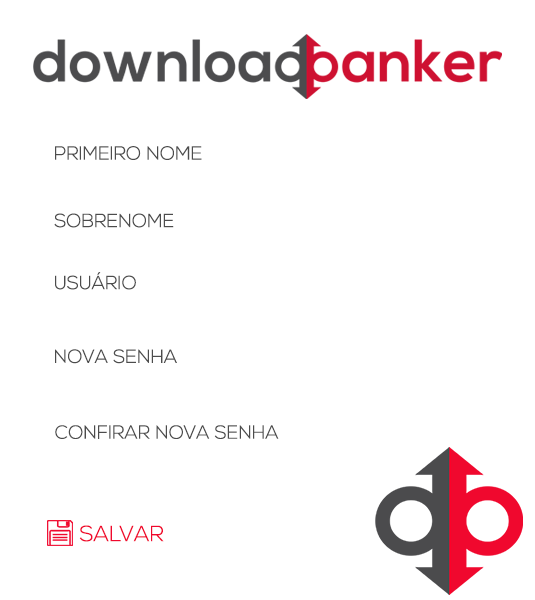
<style>
.page{position:relative;width:535px;height:600px;background:#ffffff}
.page>*{position:absolute;margin:0}
.t1{font:19px "NexaLight";color:#4c4c4c}
.t2{font:22px "NexaLight";color:#f0082e}
</style>
<div class="page">
<p class="t1" style="left:55px;top:146px;width:147px;height:14px">PRIMEIRO NOME</p>
<p class="t1" style="left:54px;top:213px;width:120px;height:15px">SOBRENOME</p>
<p class="t1" style="left:55px;top:272px;width:81px;height:18px">USUÁRIO</p>
<p class="t1" style="left:55px;top:349px;width:122px;height:15px">NOVA SENHA</p>
<p class="t1" style="left:55px;top:425px;width:224px;height:14px">CONFIRAR NOVA SENHA</p>
<p class="t2" style="left:79px;top:525px;width:85px;height:17px">SALVAR</p>
</div>
